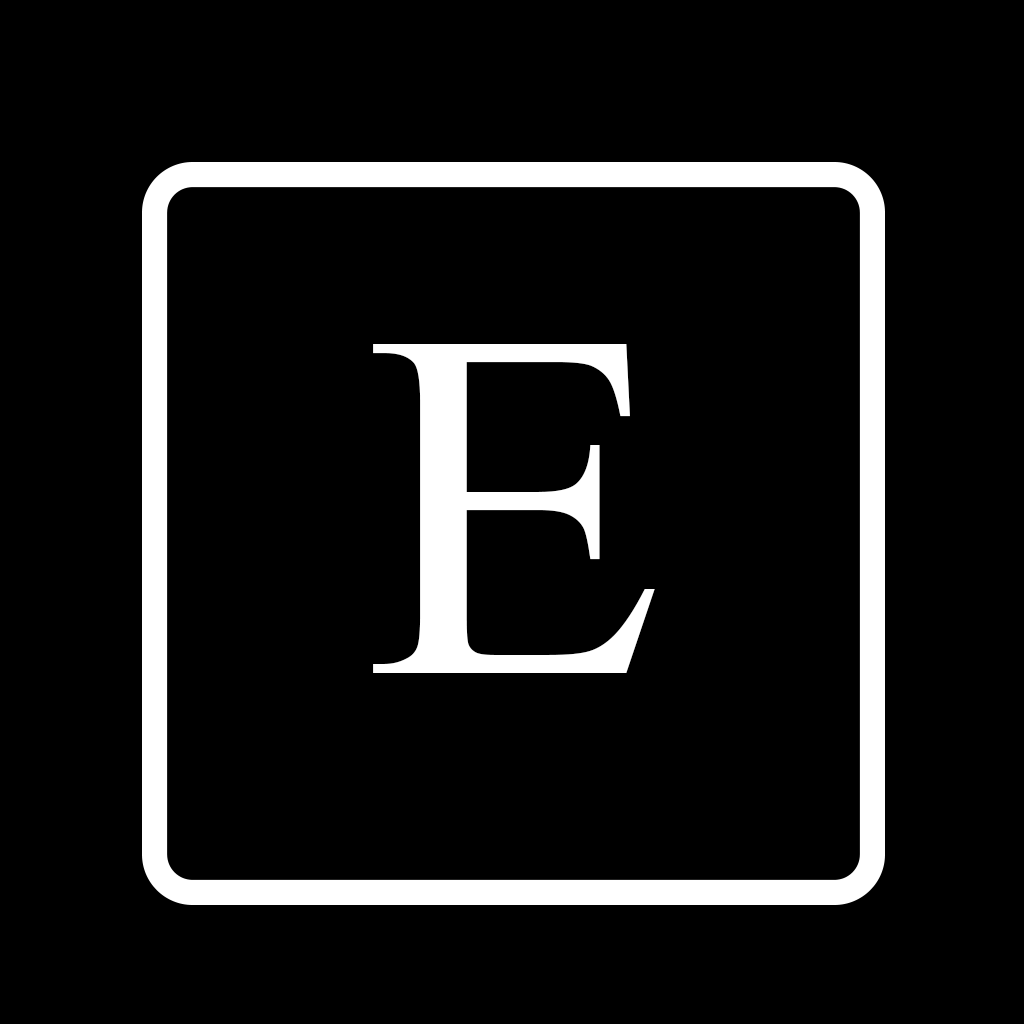
<style>
.page{position:relative;width:1024px;height:1024px;background:#000000}
.page>*{position:absolute;margin:0}
.t1{font:496.2px "TimesNewRomanPSMT";color:#ffffff}
</style>
<div class="page">
<p class="t1" style="left:373px;top:344px;width:282px;height:329px">E</p>
</div>
